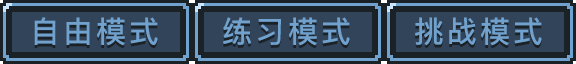
<style>
.page{position:relative;width:576px;height:64px;background:#1a2227}
.page>*{position:absolute;margin:0}
.t1{font:30px "PingFang-SC-Bold";letter-spacing:0.1em;color:#71a2ce}
</style>
<div class="page">
<p class="t1" style="left:34px;top:17px;width:124px;height:29px">自由模式</p>
<p class="t1" style="left:223px;top:17px;width:127px;height:29px">练习模式</p>
<p class="t1" style="left:415px;top:17px;width:127px;height:29px">挑战模式</p>
</div>
